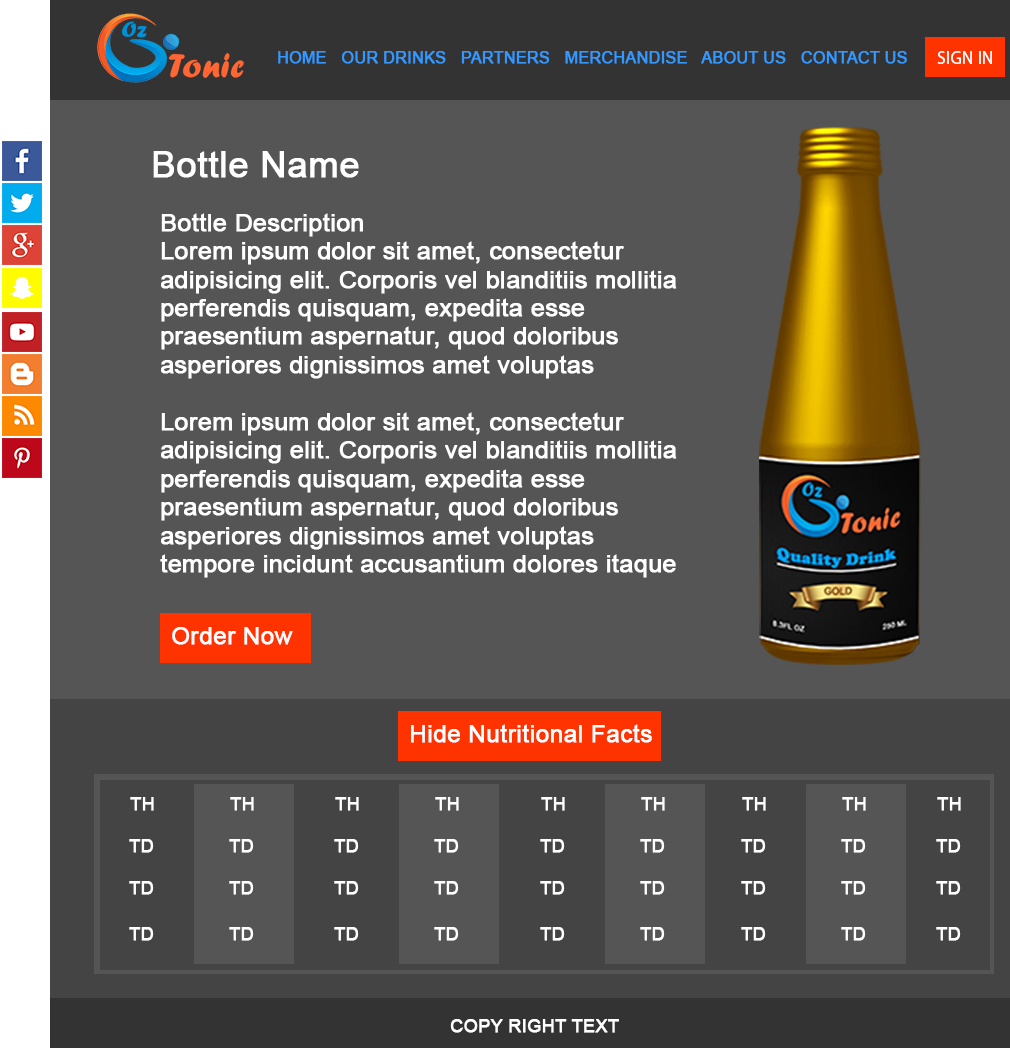
<style>
.page{position:relative;width:1010px;height:1058px;background:#555555}
.page>*{position:absolute;margin:0}
.t1{font:16px "ArialMT";color:#3399ff;font-weight:bold}
.t2{font:18px "MyriadPro-Regular";color:#ffffff}
.t3{font:36px "ArialMT";color:#ffffff;font-weight:bold}
.t4{font:23.7px "ArialMT";color:#ffffff;font-weight:bold;scale:1.04 1}
.t5{font:24px "ArialMT";color:#ffffff;font-weight:bold}
.t6{font:17.9px "ArialMT";color:#ffffff;font-weight:bold}
.t7{font:18px "ArialMT";color:#ffffff;font-weight:bold}
</style>
<div class="page">
<p class="t1" style="left:278px;top:51px;width:629px;height:13px">HOME   OUR DRINKS   PARTNERS   MERCHANDISE   ABOUT US   CONTACT US</p>
<p class="t2" style="left:937px;top:51px;width:55px;height:13px">SIGN IN</p>
<p class="t3" style="left:153px;top:151px;width:206px;height:27px">Bottle Name</p>
<p class="t4" style="left:160px;top:213px;width:517px;height:365px">Bottle Description<br>Lorem ipsum dolor sit amet, consectetur adipisicing elit. Corporis vel blanditiis mollitia perferendis quisquam, expedita esse praesentium aspernatur, quod doloribus asperiores dignissimos amet voluptas <br><br>Lorem ipsum dolor sit amet, consectetur adipisicing elit. Corporis vel blanditiis mollitia perferendis quisquam, expedita esse praesentium aspernatur, quod doloribus asperiores dignissimos amet voluptas tempore incidunt accusantium dolores itaque</p>
<p class="t5" style="left:172px;top:627px;width:121px;height:18px">Order Now</p>
<p class="t5" style="left:411px;top:724px;width:241px;height:19px">Hide Nutritional Facts</p>
<p class="t6" style="left:130px;top:797px;width:24px;height:14px">TH</p>
<p class="t6" style="left:230px;top:797px;width:24px;height:14px">TH</p>
<p class="t6" style="left:335px;top:797px;width:24px;height:14px">TH</p>
<p class="t6" style="left:435px;top:797px;width:24px;height:14px">TH</p>
<p class="t6" style="left:541px;top:797px;width:24px;height:14px">TH</p>
<p class="t6" style="left:641px;top:797px;width:24px;height:14px">TH</p>
<p class="t6" style="left:742px;top:797px;width:24px;height:14px">TH</p>
<p class="t6" style="left:842px;top:797px;width:24px;height:14px">TH</p>
<p class="t6" style="left:937px;top:797px;width:24px;height:14px">TH</p>
<p class="t6" style="left:129px;top:839px;width:25px;height:14px">TD</p>
<p class="t6" style="left:229px;top:839px;width:25px;height:14px">TD</p>
<p class="t6" style="left:334px;top:839px;width:25px;height:14px">TD</p>
<p class="t6" style="left:434px;top:839px;width:25px;height:14px">TD</p>
<p class="t6" style="left:540px;top:839px;width:25px;height:14px">TD</p>
<p class="t6" style="left:640px;top:839px;width:25px;height:14px">TD</p>
<p class="t6" style="left:741px;top:839px;width:25px;height:14px">TD</p>
<p class="t6" style="left:841px;top:839px;width:25px;height:14px">TD</p>
<p class="t6" style="left:936px;top:839px;width:25px;height:14px">TD</p>
<p class="t6" style="left:129px;top:881px;width:25px;height:14px">TD</p>
<p class="t6" style="left:229px;top:881px;width:25px;height:14px">TD</p>
<p class="t6" style="left:334px;top:881px;width:25px;height:14px">TD</p>
<p class="t6" style="left:434px;top:881px;width:25px;height:14px">TD</p>
<p class="t6" style="left:540px;top:881px;width:25px;height:14px">TD</p>
<p class="t6" style="left:640px;top:881px;width:25px;height:14px">TD</p>
<p class="t6" style="left:741px;top:881px;width:25px;height:14px">TD</p>
<p class="t6" style="left:841px;top:881px;width:25px;height:14px">TD</p>
<p class="t6" style="left:936px;top:881px;width:25px;height:14px">TD</p>
<p class="t6" style="left:129px;top:927px;width:25px;height:14px">TD</p>
<p class="t6" style="left:229px;top:927px;width:25px;height:14px">TD</p>
<p class="t6" style="left:334px;top:927px;width:25px;height:14px">TD</p>
<p class="t6" style="left:434px;top:927px;width:25px;height:14px">TD</p>
<p class="t6" style="left:540px;top:927px;width:25px;height:14px">TD</p>
<p class="t6" style="left:640px;top:927px;width:25px;height:14px">TD</p>
<p class="t6" style="left:741px;top:927px;width:25px;height:14px">TD</p>
<p class="t6" style="left:841px;top:927px;width:25px;height:14px">TD</p>
<p class="t6" style="left:936px;top:927px;width:25px;height:14px">TD</p>
<p class="t7" style="left:450px;top:1019px;width:169px;height:14px">COPY RIGHT TEXT</p>
</div>
